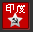
<style>
.page{position:relative;width:33px;height:32px;background:#c50000}
.page>*{position:absolute;margin:0}
.t1{font:10.4px "SimSun";color:#ffffff}
</style>
<div class="page">
<p class="t1" style="left:6px;top:4px;width:19px;height:9px">印度</p>
</div>
